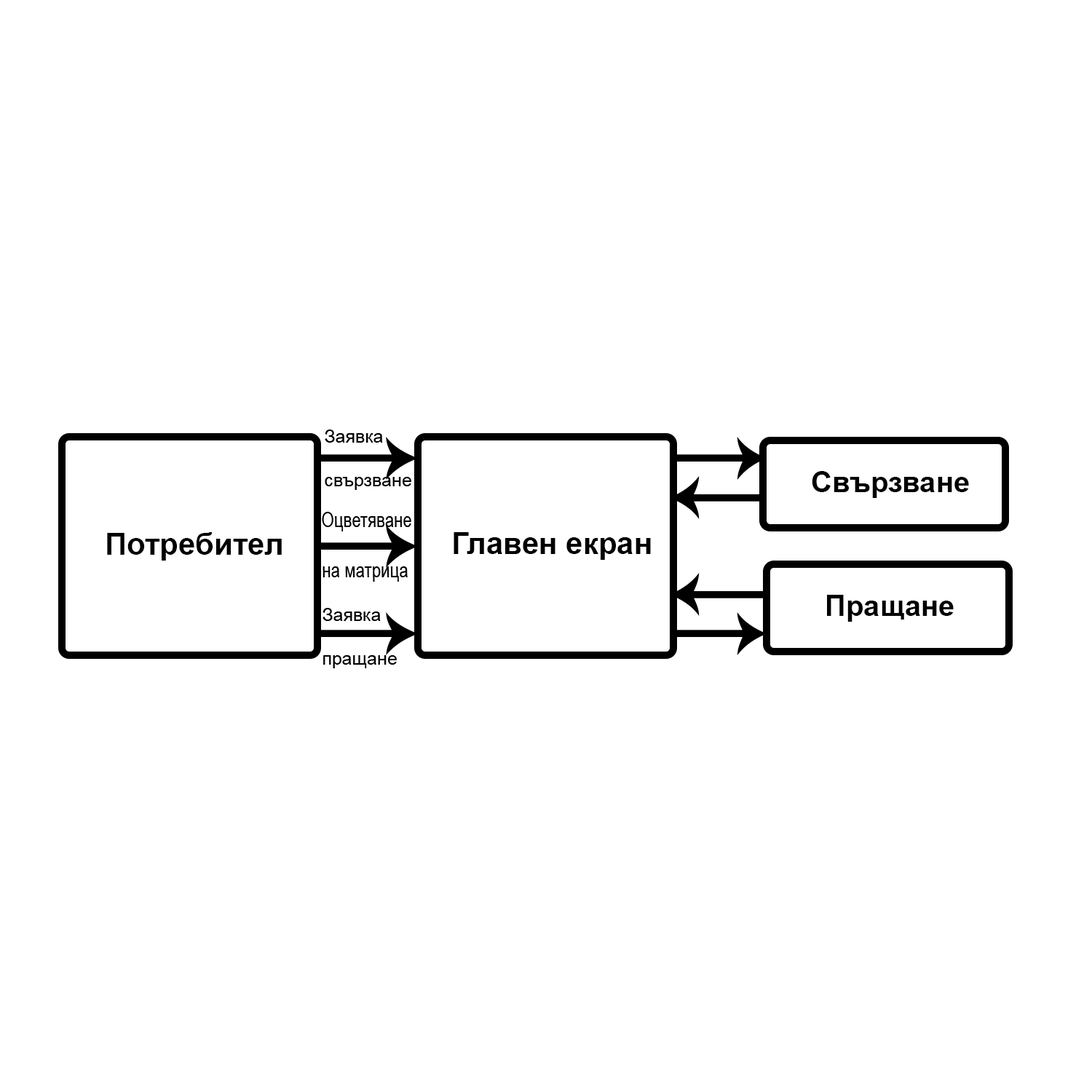
<style>
.page{position:relative;width:1092px;height:1092px;background:#ffffff}
.page>*{position:absolute;margin:0}
.t1{font:18.2px "ArialMT";color:#000000}
.t2{font:29px "Arial-BoldMT";color:#000000}
.t3{font:20.8px "ArialMT";color:#000000;scale:0.78 1}
.t4{font:30.6px "Arial-BoldMT";color:#000000}
</style>
<div class="page">
<p class="t1" style="left:325px;top:430px;width:86px;height:60px;text-align:justify">Заявка<br><br>свързване</p>
<p class="t2" style="left:812px;top:471px;width:157px;height:27px">Свързване</p>
<p class="t3" style="left:322px;top:512px;width:89px;height:70px;text-align:justify">Оцветяване<br><br>на матрица</p>
<p class="t4" style="left:107px;top:532px;width:175px;height:29px">Потребител</p>
<p class="t4" style="left:454px;top:532px;width:197px;height:28px">Главен екран</p>
<p class="t2" style="left:827px;top:595px;width:127px;height:27px">Пращане</p>
<p class="t1" style="left:322px;top:608px;width:75px;height:60px;text-align:justify">Заявка<br><br>пращане</p>
</div>
